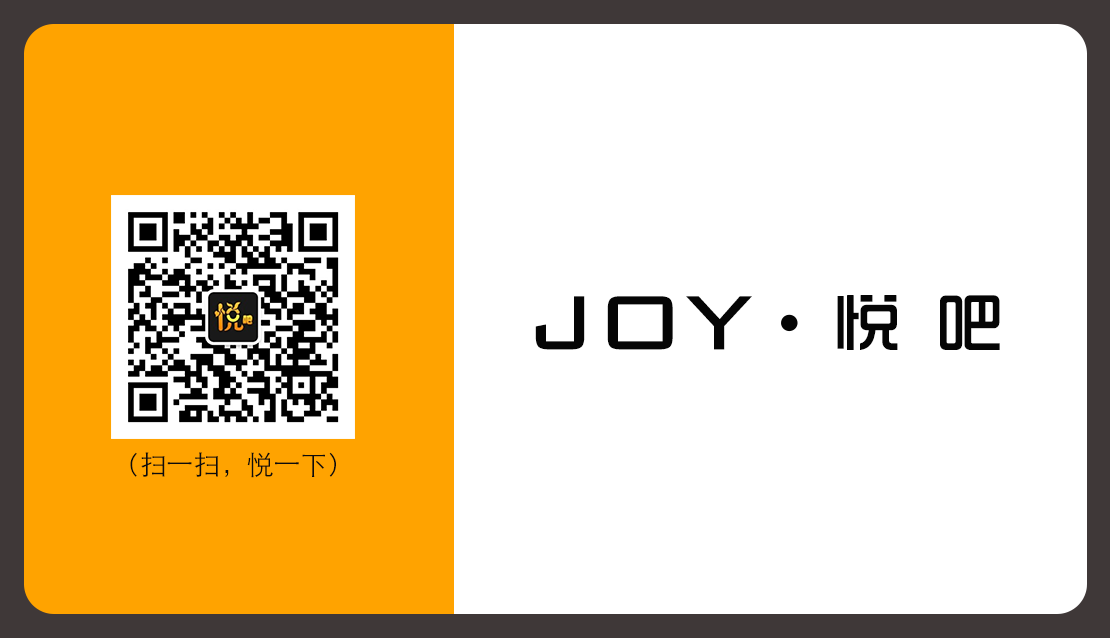
<style>
.page{position:relative;width:1110px;height:638px;background:#ffffff}
.page>*{position:absolute;margin:0}
.t1{font:125px "BankGothicBT-Light";color:#050505}
.t2{font:65.4px "ShiShangZhongHei";color:#050505;font-weight:bold}
.t3{font:26.9px "STHeitiSC-Light";color:#0c0c0c}
</style>
<div class="page">
<p class="t1" style="left:535px;top:296px;width:217px;height:54px">joy</p>
<p class="t2" style="left:837px;top:295px;width:163px;height:55px">悦 吧</p>
<p class="t3" style="left:130px;top:452px;width:206px;height:26px">（扫一扫，悦一下）</p>
</div>
